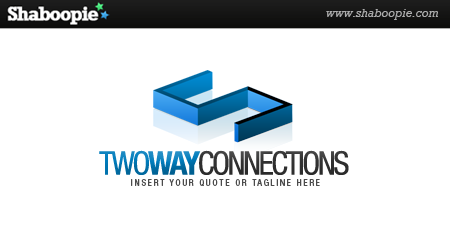
<style>
.page{position:relative;width:450px;height:250px;background:#ffffff}
.page>*{position:absolute;margin:0}
.t1{font:32.3px "HelveticaNeueLTStd-Cn";letter-spacing:-0.075em;color:#343434}
.t2{font:32.3px "HelveticaNeueLTStd-Cn";letter-spacing:-0.075em;color:#007cbc}
.t3{font:32.3px "HelveticaNeueLTStd-BdCn";letter-spacing:-0.075em;color:#007cbc}
.t4{font:9px "HelveticaNeueLTStd-Cn";letter-spacing:0.2em;color:#4b4b4b}
</style>
<div class="page">
<p class="t1" style="left:99px;top:150px;width:250px;height:25px"><span class="t2">TWO</span><span class="t3">WAY</span>CONNECTIONS</p>
<p class="t4" style="left:131px;top:179px;width:189px;height:7px">INSERT YOUR QUOTE OR TAGLINE HERE</p>
</div>
